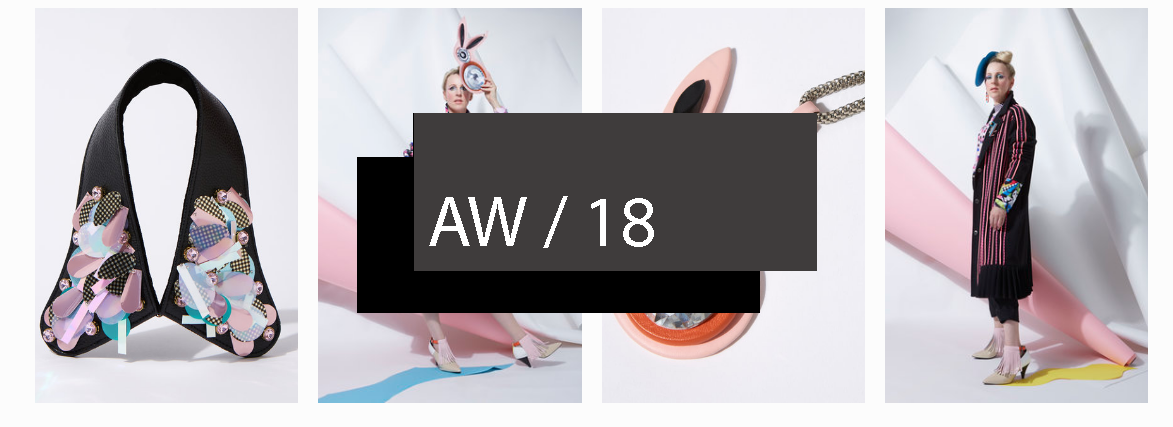
<style>
.page{position:relative;width:1173px;height:427px}
.page>*{position:absolute;margin:0}
.t1{font:72px "MyriadPro-Regular";color:#ffffff}
</style>
<div class="page">
<p class="t1" style="left:429px;top:196px;width:225px;height:52px">AW / 18</p>
</div>
